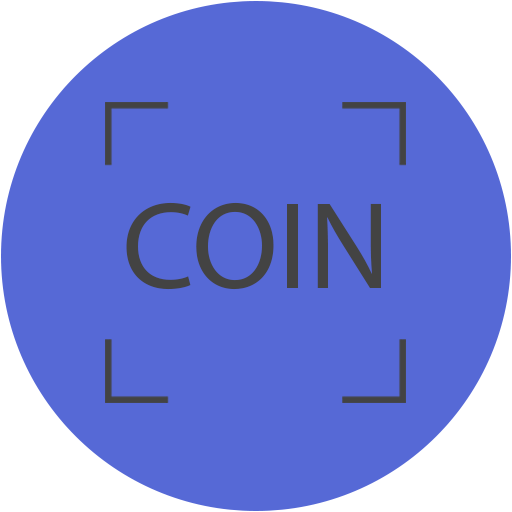
<style>
.page{position:relative;width:512px;height:512px;background:#5669d6}
.page>*{position:absolute;margin:0}
.t1{font:125px "MyriadPro-Regular";color:#434343}
</style>
<div class="page">
<p class="t1" style="left:126px;top:202px;width:255px;height:88px">COIN</p>
</div>
